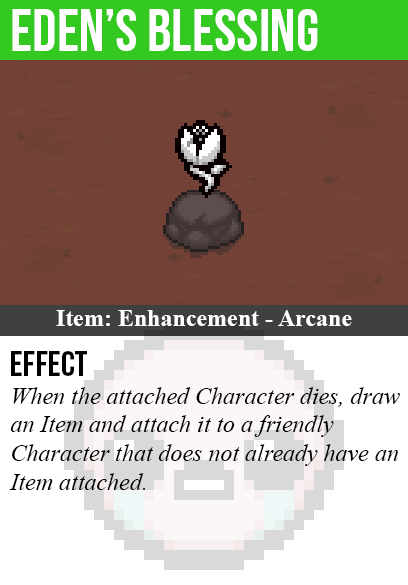
<style>
.page{position:relative;width:408px;height:585px;background:#734136}
.page>*{position:absolute;margin:0}
.t1{font:60px "BebasNeue";color:#ffffff}
.t2{font:24px "TimesNewRomanPS-BoldMT";color:#ffffff}
.t3{font:36px "BebasNeue";color:#000000}
.t4{font:24px "TimesNewRomanPS-ItalicMT";color:#000000}
</style>
<div class="page">
<p class="t1" style="left:12px;top:9px;width:306px;height:42px">eden’s blessing</p>
<p class="t2" style="left:56px;top:310px;width:296px;height:16px">Item: Enhancement - Arcane</p>
<p class="t3" style="left:11px;top:351px;width:76px;height:25px">Effect</p>
<p class="t4" style="left:9px;top:387px;width:391px;height:103px">When the attached Character dies, draw<br>an Item and attach it to a friendly<br>Character that does not already have an<br>Item attached.</p>
</div>
